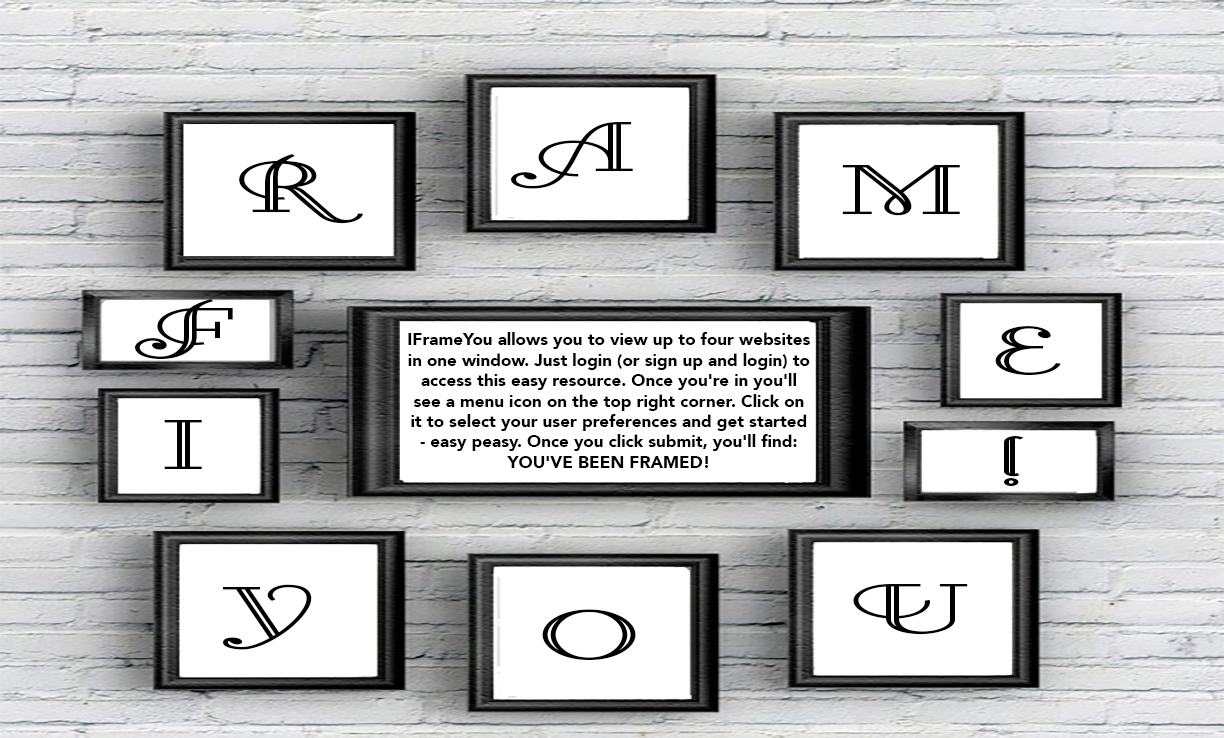
<style>
.page{position:relative;width:1224px;height:738px;background:#ffffff}
.page>*{position:absolute;margin:0}
.t1{font:84px "LittleLordFontleroyNF";color:#000000;scale:2.04 1}
.t2{font:17px "Avenir-Black";color:#000000}
</style>
<div class="page">
<p class="t1" style="left:511px;top:122px;width:122px;height:67px">A</p>
<p class="t1" style="left:239px;top:154px;width:124px;height:70px">R</p>
<p class="t1" style="left:842px;top:165px;width:118px;height:51px">M</p>
<p class="t1" style="left:135px;top:299px;width:98px;height:60px">F</p>
<p class="t1" style="left:995px;top:326px;width:66px;height:49px">E</p>
<p class="t2" style="left:408px;top:332px;width:402px;height:136px;text-align:center">IFrameYou allows you to view up to four websites in one window. Just login (or sign up and login) to access this easy resource. Once you're in you'll see a menu icon on the top right corner. Click on it to select your user preferences and get started - easy peasy. Once you click submit, you'll find: YOU'VE BEEN FRAMED!</p>
<p class="t1" style="left:164px;top:420px;width:38px;height:49px">I</p>
<p class="t1" style="left:1004px;top:436px;width:20px;height:50px">!</p>
<p class="t1" style="left:223px;top:584px;width:89px;height:66px">Y</p>
<p class="t1" style="left:853px;top:584px;width:115px;height:51px">U</p>
<p class="t1" style="left:542px;top:609px;width:94px;height:51px">O</p>
</div>
